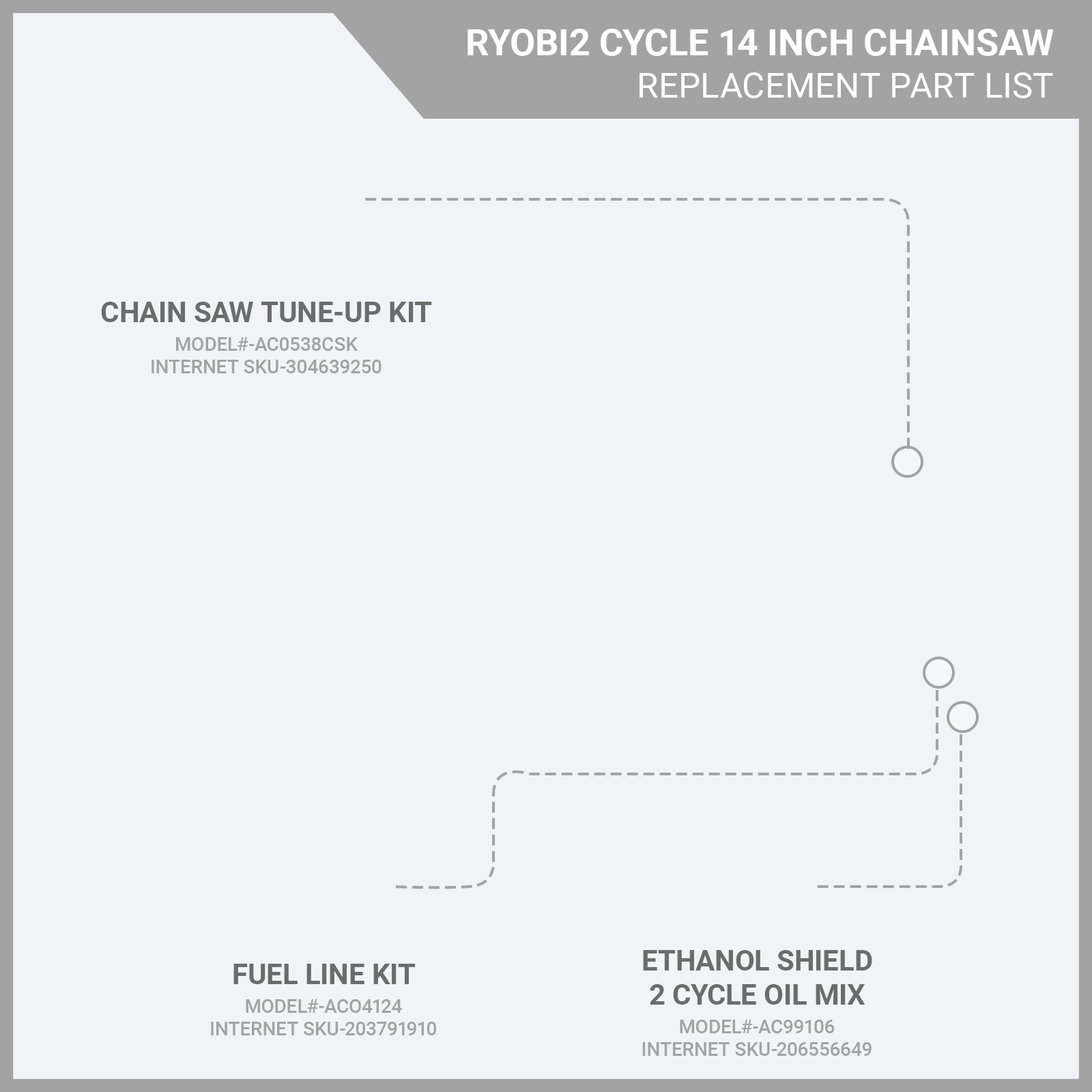
<style>
.page{position:relative;width:1092px;height:1092px;background:#f2f3f6}
.page>*{position:absolute;margin:0}
.t1{font:37px "Roboto-Bold";color:#ffffff}
.t2{font:35.1px "Roboto-Regular";color:#ffffff}
.t3{font:28.4px "Roboto-Bold";color:#6c6c6c}
.t4{font:18.9px "Roboto-Medium";color:#a3a3a3}
</style>
<div class="page">
<p class="t1" style="left:468px;top:29px;width:586px;height:27px">RYOBI2 CYCLE 14 INCH CHAINSAW</p>
<p class="t2" style="left:639px;top:72px;width:414px;height:26px">REPLACEMENT PART LIST</p>
<p class="t3" style="left:101px;top:302px;width:331px;height:20px">CHAIN SAW TUNE-UP KIT</p>
<p class="t4" style="left:152px;top:337px;width:230px;height:36px;text-align:center">MODEL#-AC0538CSK<br>INTERNET SKU-304639250</p>
<p class="t3" style="left:643px;top:950px;width:229px;height:55px;text-align:center">ETHANOL SHIELD<br>2 CYCLE OIL MIX</p>
<p class="t3" style="left:233px;top:964px;width:183px;height:20px">FUEL LINE KIT</p>
<p class="t4" style="left:211px;top:999px;width:225px;height:36px;text-align:center">MODEL#-ACO4124<br>INTERNET SKU-203791910</p>
<p class="t4" style="left:642px;top:1020px;width:230px;height:36px;text-align:center">MODEL#-AC99106<br>INTERNET SKU-206556649</p>
</div>
